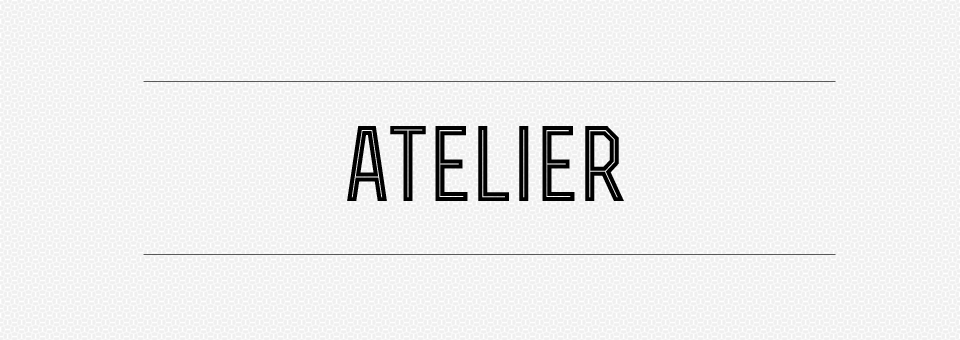
<style>
.page{position:relative;width:960px;height:340px}
.page>*{position:absolute;margin:0}
.t1{font:100px "RexBoldInline";color:#000000}
</style>
<div class="page">
<p class="t1" style="left:347px;top:126px;width:277px;height:75px">atelier</p>
</div>
